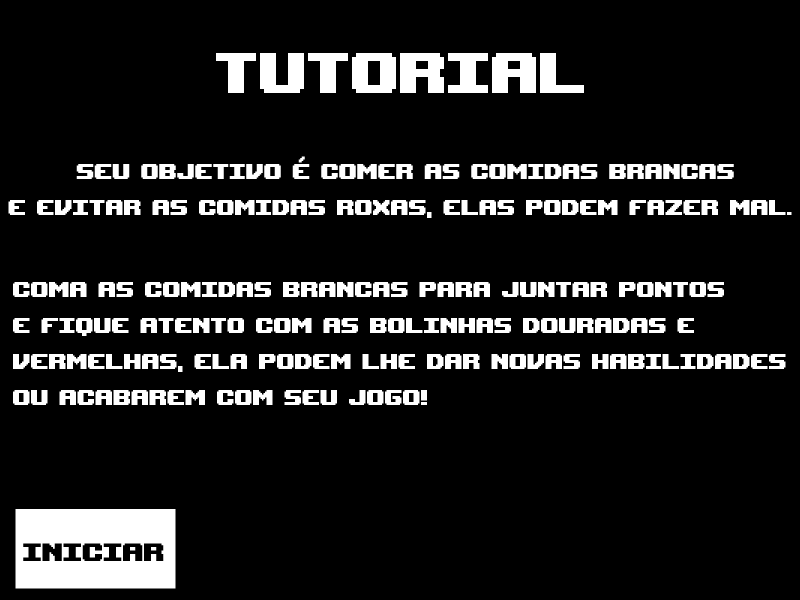
<style>
.page{position:relative;width:800px;height:600px;background:#000000}
.page>*{position:absolute;margin:0}
.t1{font:80px "UpheavalTT-BRK-";color:#ffffff}
.t2{font:30px "UpheavalTT-BRK-";color:#ffffff}
.t3{font:35px "UpheavalTT-BRK-";color:#000000}
</style>
<div class="page">
<p class="t1" style="left:216px;top:53px;width:368px;height:40px">TUTORIAL</p>
<p class="t2" style="left:8px;top:156px;width:784px;height:62px;text-align:center">Seu objetivo é comer as comidas brancas<br>e evitar as comidas roxas, elas podem fazer mal.</p>
<p class="t2" style="left:13px;top:282px;width:773px;height:123px">coma as comidas brancas para juntar pontos<br>e fique atento com as bolinhas douradas e <br>vermelhas, ela podem lhe dar novas habilidades<br>ou acabarem com seu jogo!</p>
<p class="t3" style="left:23px;top:543px;width:141px;height:18px">INICIAR</p>
</div>
